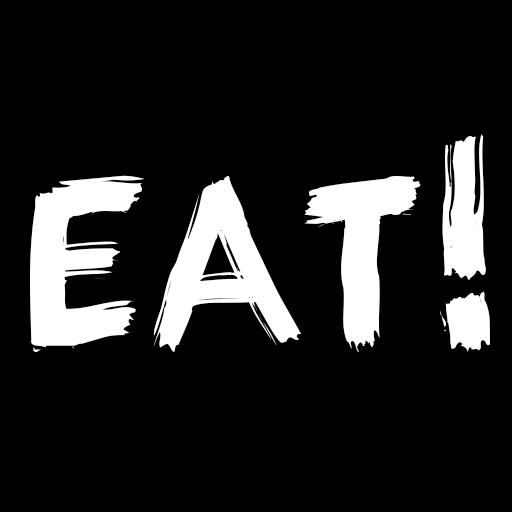
<style>
.page{position:relative;width:512px;height:512px;background:#000000}
.page>*{position:absolute;margin:0}
.t1{font:220px "appopaint-Regular";color:#ffffff}
</style>
<div class="page">
<p class="t1" style="left:30px;top:134px;width:460px;height:218px">EAT!</p>
</div>
